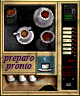
<style>
.page{position:relative;width:80px;height:96px}
.page>*{position:absolute;margin:0}
.t1{font:9.3px/8px "TimesNewRomanPS-BoldItalicMT";letter-spacing:-0.02em;color:#310042;scale:1.05 1}
</style>
<div class="page">
<p class="t1" style="left:2px;top:56px;width:33px;height:15px;text-align:center">preparo<br>pronto</p>
</div>
